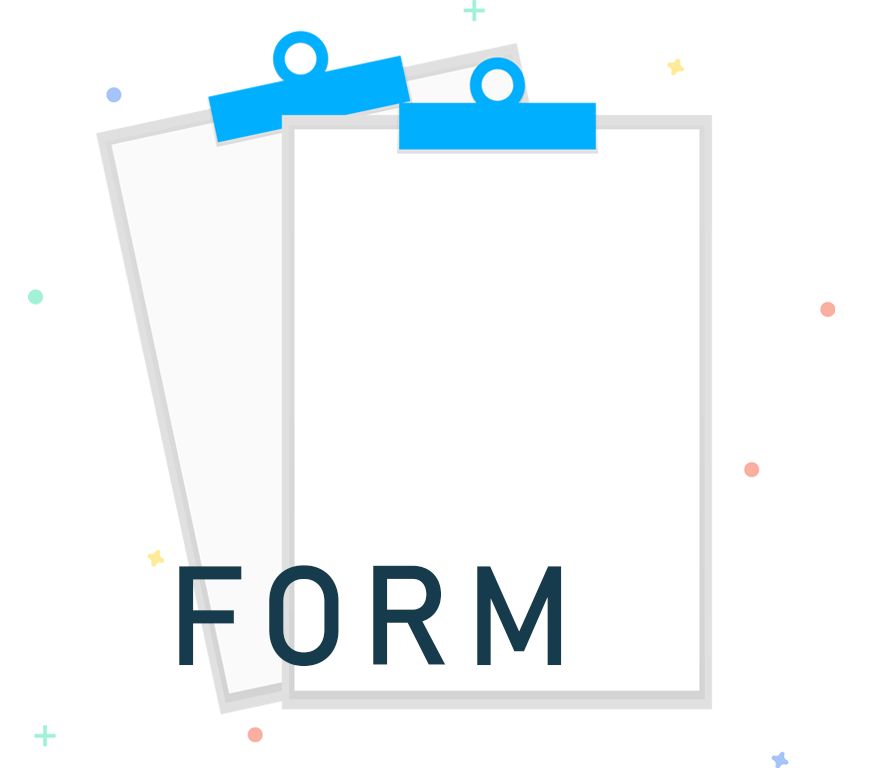
<style>
.page{position:relative;width:870px;height:768px;background:#ffffff}
.page>*{position:absolute;margin:0}
.t1{font:138.6px "Bahnschrift";letter-spacing:0.1em;color:#153b4c;font-weight:bold}
</style>
<div class="page">
<p class="t1" style="left:179px;top:565px;width:383px;height:102px">FORM</p>
</div>
